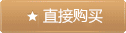
<style>
.page{position:relative;width:126px;height:33px}
.page>*{position:absolute;margin:0}
.t1{font:15px "MicrosoftYaHei";color:#ffffff}
</style>
<div class="page">
<p class="t1" style="left:43px;top:8px;width:60px;height:16px">直接购买</p>
</div>
